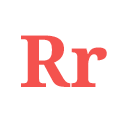
<style>
.page{position:relative;width:128px;height:128px;background:#ffffff}
.page>*{position:absolute;margin:0}
.t1{font:72px "DroidSerif-Bold";color:#f4524e}
</style>
<div class="page">
<p class="t1" style="left:21px;top:35px;width:86px;height:52px">Rr</p>
</div>
